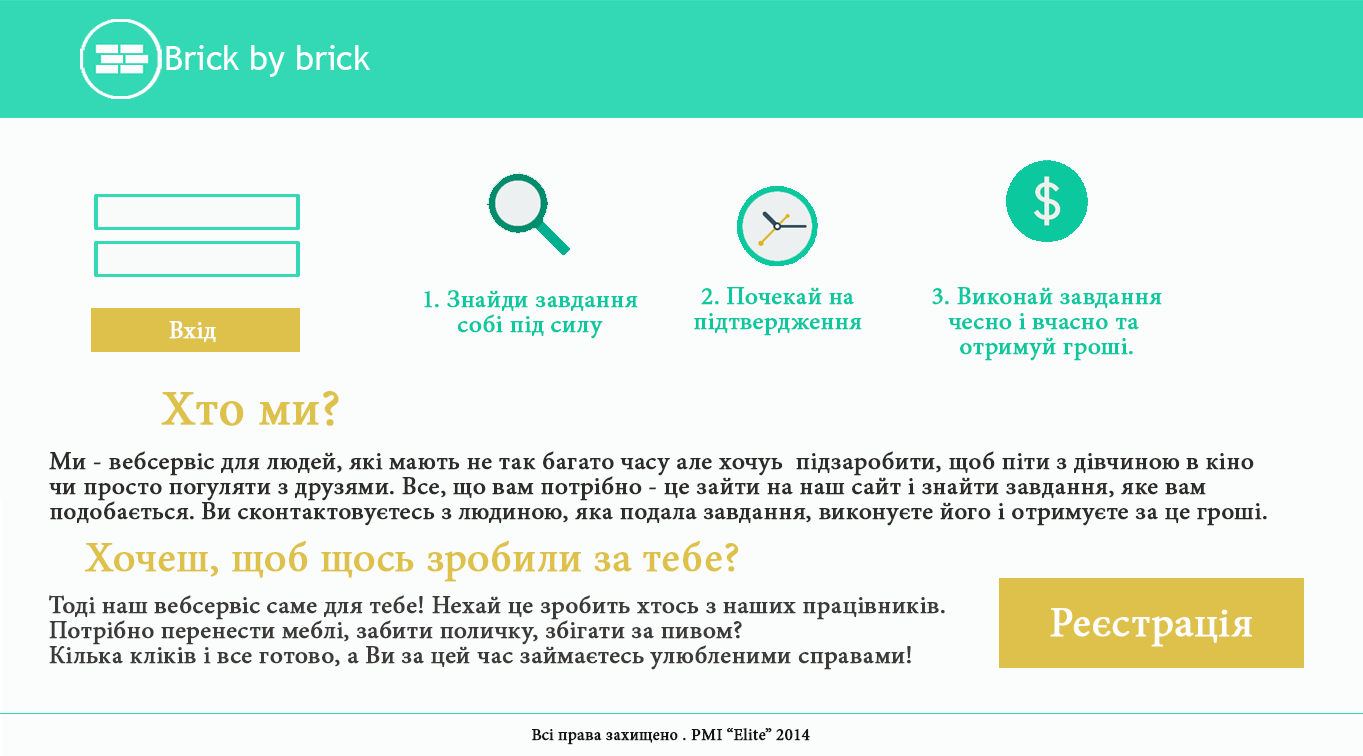
<style>
.page{position:relative;width:1363px;height:756px;background:#fbfcfc}
.page>*{position:absolute;margin:0}
.t1{font:33.8px "TrebuchetMS";color:#ffffff}
.t2{font:25px/25px "MinionPro-Regular";color:#0bc89e;font-weight:bold}
.t3{font:25px/41.7px "MinionPro-Regular";color:#0bc89e;font-weight:bold}
.t4{font:25px "MinionPro-Regular";color:#fbfcfc;font-weight:bold}
.t5{font:50px "MinionPro-Regular";color:#dec14b;font-weight:bold}
.t6{font:25px/25px "MinionPro-Regular";color:#2d2c2a;font-weight:bold}
.t7{font:41.7px "MinionPro-Regular";color:#dec14b;font-weight:bold}
.t8{font:25px/25px "MinionPro-Regular";color:#3c3b39;font-weight:bold}
.t9{font:41.7px "MinionPro-Regular";color:#ffffff;font-weight:bold}
.t10{font:16.7px "MinionPro-Regular";color:#141515;font-weight:bold}
</style>
<div class="page">
<p class="t1" style="left:166px;top:45px;width:204px;height:32px">Brick by brick</p>
<p class="t2" style="left:424px;top:290px;width:214px;height:49px;text-align:center">1. Знайди завдання<br>собі під силу</p>
<p class="t2" style="left:694px;top:287px;width:168px;height:49px;text-align:center">2. Почекай на<br>підтвердження</p>
<p class="t2" style="left:932px;top:287px;width:230px;height:74px;text-align:center"><span class="t3">3</span>. Виконай завдання<br>чесно і вчасно та <br>отримуй гроші.</p>
<p class="t4" style="left:169px;top:321px;width:47px;height:22px">Вхід</p>
<p class="t5" style="left:161px;top:391px;width:178px;height:35px">Хто ми?</p>
<p class="t6" style="left:49px;top:451px;width:1218px;height:75px">Ми - вебсервіс для людей, які мають не так багато часу але хочуь  підзаробити, щоб піти з дівчиною в кіно<br>чи просто погуляти з друзями. Все, що вам потрібно - це зайти на наш сайт і знайти завдання, яке вам <br>подобається. Ви сконтактовуєтесь з людиною, яка подала завдання, виконуєте його і отримуєте за це гроші.</p>
<p class="t7" style="left:85px;top:541px;width:654px;height:41px">Хочеш, щоб щось зробили за тебе?</p>
<p class="t8" style="left:49px;top:595px;width:896px;height:75px">Тоді наш вебсервіс саме для тебе! Нехай це зробить хтось з наших працівників. <br>Потрібно перенести меблі, забити поличку, збігати за пивом? <br>Кілька кліків і все готово, а Ви за цей час займаєтесь улюбленими справами!</p>
<p class="t9" style="left:1050px;top:608px;width:202px;height:39px">Реєстрація</p>
<p class="t10" style="left:531px;top:727px;width:279px;height:18px">Всі права захищено . PMI “Elite” 2014</p>
</div>
